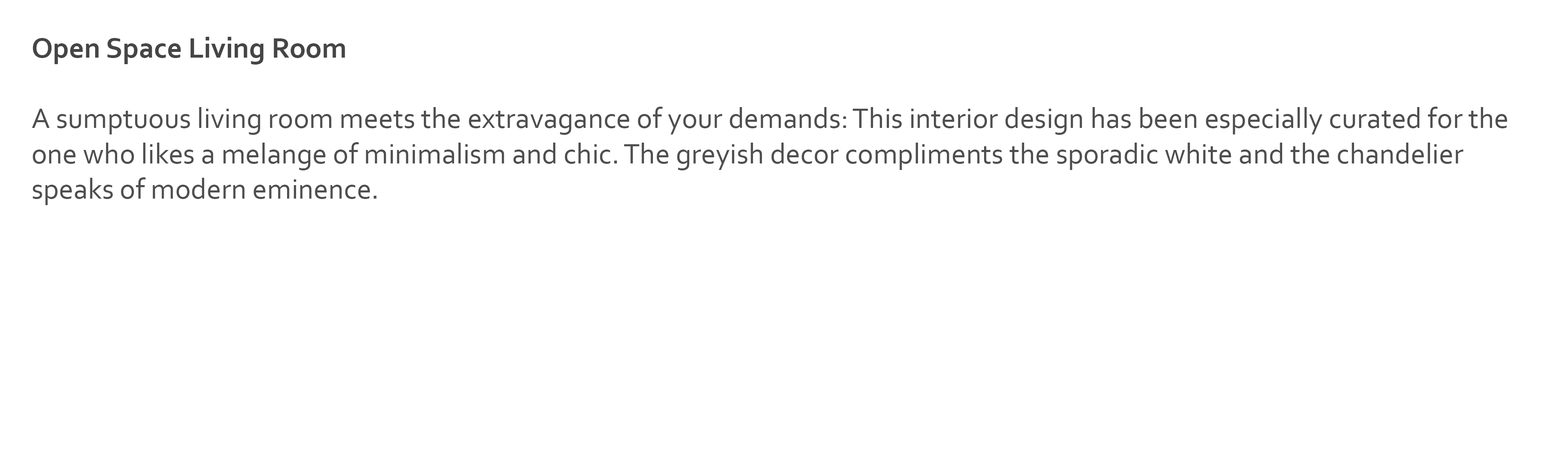
<style>
.page{position:relative;width:1568px;height:474px;background:#ffffff}
.page>*{position:absolute;margin:0}
.t1{font:29.4px "Corbel";color:#4e4e4e}
.t2{font:29.4px "Corbel-Bold";color:#454545}
</style>
<div class="page">
<p class="t1" style="left:32px;top:37px;width:1475px;height:168px"><span class="t2">Open Space Living Room<br><br></span>A sumptuous living room meets the extravagance of your demands: This interior design has been especially curated for the one who likes a melange of minimalism and chic. The greyish decor compliments the sporadic white and the chandelier speaks of modern eminence.</p>
</div>
